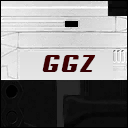
<style>
.page{position:relative;width:128px;height:128px}
.page>*{position:absolute;margin:0}
.t1{font:24px "Aero";letter-spacing:0.1em;color:#3a0002}
</style>
<div class="page">
<p class="t1" style="left:42px;top:55px;width:54px;height:17px">GGZ</p>
</div>
